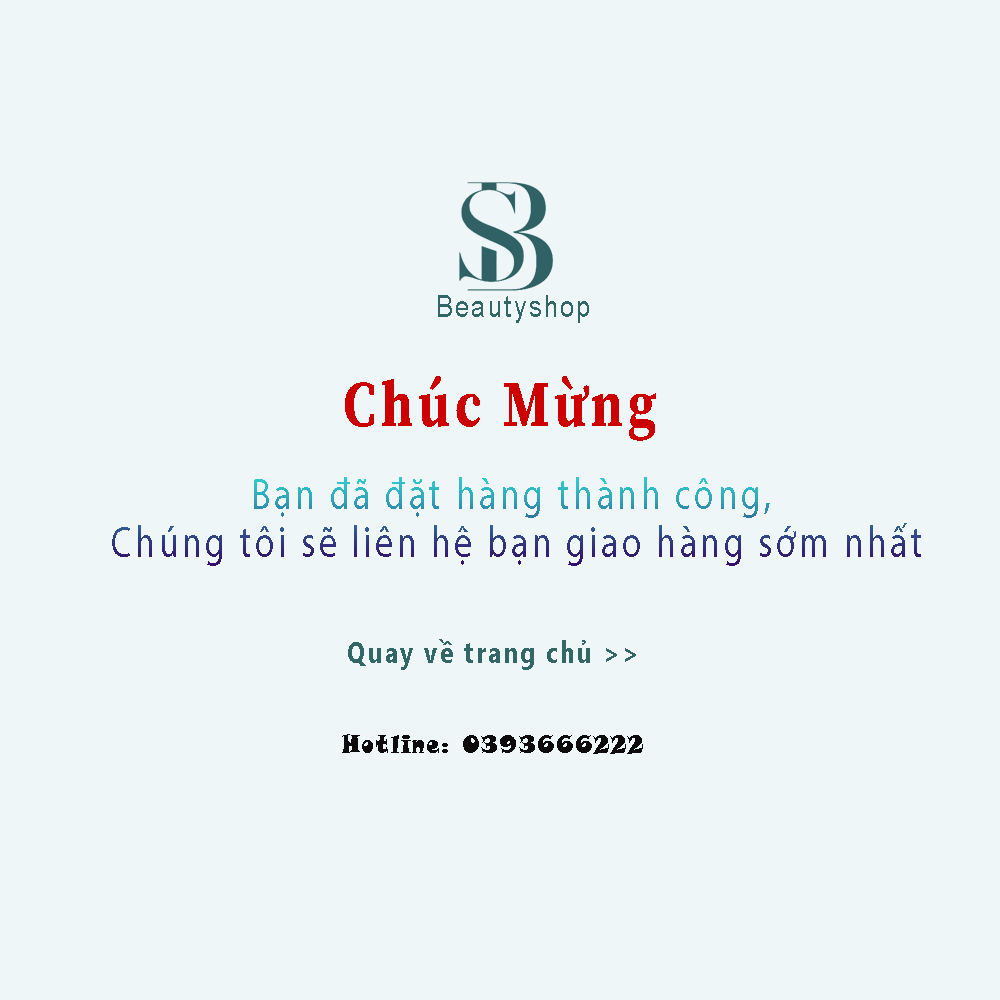
<style>
.page{position:relative;width:1000px;height:1000px;background:#eff6f7}
.page>*{position:absolute;margin:0}
.t1{font:31px "ArialMT";letter-spacing:0.1em;color:#336666;scale:0.8 1}
.t2{font:64.9px "SourceSerifRoman-Bold";letter-spacing:0.1em;color:#cc0000;scale:0.8 1}
.t3{font:44.3px/48px "MyriadPro-Regular";letter-spacing:0.1em;scale:0.8 1}
.t4{font:29.5px "SegoeUI-Bold";letter-spacing:0.1em;color:#336666;scale:0.8 1}
.t5{font:25.2px "SnapITC-Regular";letter-spacing:0.1em;color:#0d0b0b;scale:0.8 1}
</style>
<div class="page">
<p class="t1" style="left:438px;top:295px;width:151px;height:28px">Beautyshop</p>
<p class="t2" style="left:345px;top:376px;width:311px;height:65px">Chúc Mừng</p>
<p class="t3" style="left:112px;top:477px;width:809px;height:89px;text-align:center">Bạn đã đặt hàng thành công, <br>Chúng tôi sẽ liên hệ bạn giao hàng sớm nhất</p>
<p class="t4" style="left:348px;top:639px;width:288px;height:31px">Quay về trang chủ &gt;&gt;</p>
<p class="t5" style="left:342px;top:734px;width:301px;height:20px">Hotline: 0393666222</p>
</div>
